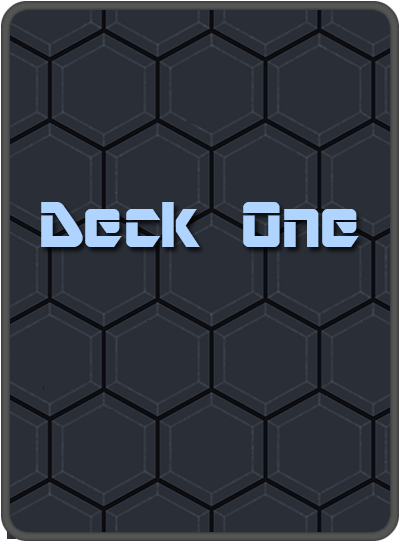
<style>
.page{position:relative;width:400px;height:543px;background:#2a2e37}
.page>*{position:absolute;margin:0}
.t1{font:72px "ARDESTINE";color:#aed4ff}
</style>
<div class="page">
<p class="t1" style="left:41px;top:202px;width:318px;height:45px">Deck One</p>
</div>
